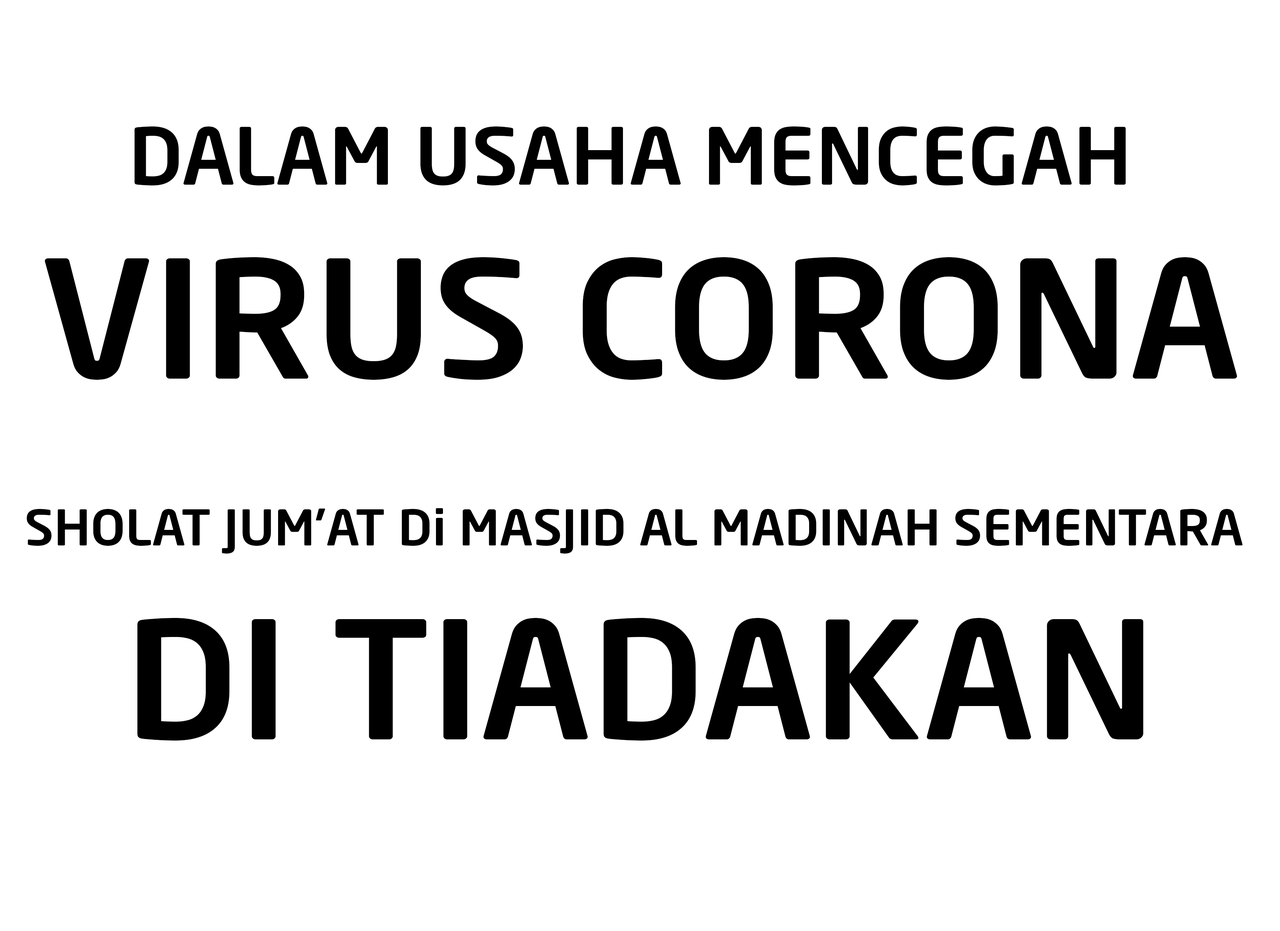
<style>
.page{position:relative;width:1280px;height:931px;background:#ffffff}
.page>*{position:absolute;margin:0}
.t1{font:48.5px "NeoSansPro-Medium";color:#000000;scale:1.06 1}
.t2{font:77.6px "NeoSansPro-Medium";color:#000000;scale:1.06 1}
.t3{font:161.7px "NeoSansPro-Medium";color:#000000;scale:1.06 1}
</style>
<div class="page">
<p class="t1" style="left:26px;top:126px;width:1217px;height:615px;text-align:center"><span class="t2"><br>DALAM USAHA MENCEGAH <br></span><span class="t3">VIRUS CORONA<br><br><br><br><br><br><br><br></span>SHOLAT JUM’AT Di MASJID AL MADINAH SEMENTARA <br><span class="t3">DI TIADAKAN</span></p>
</div>
